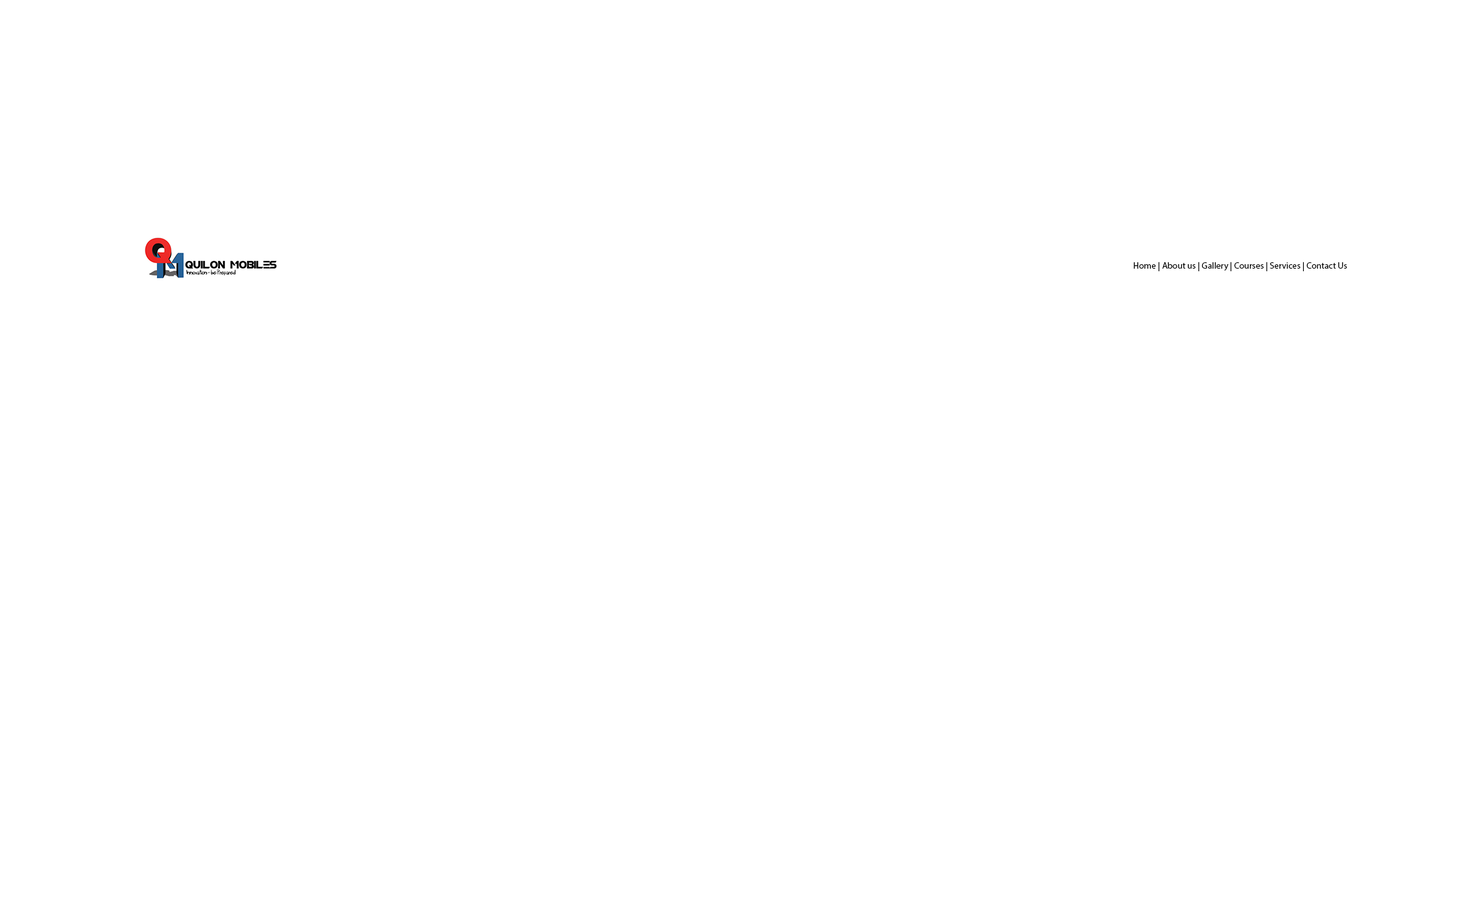
<style>
.page{position:relative;width:1471px;height:923px;background:#ffffff}
.page>*{position:absolute;margin:0}
.t1{font:9px "MyriadPro-Regular";color:#000000}
</style>
<div class="page">
<p class="t1" style="left:1133px;top:262px;width:214px;height:9px">Home | About us | Gallery | Courses | Services | Contact Us</p>
</div>
